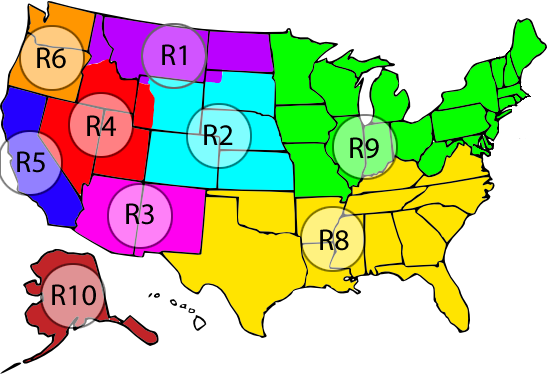
<style>
.page{position:relative;width:550px;height:375px;background:#ffffff}
.page>*{position:absolute;margin:0}
.t1{font:30px "MyriadPro-Regular";color:#000000}
</style>
<div class="page">
<p class="t1" style="left:37px;top:47px;width:29px;height:22px">R6</p>
<p class="t1" style="left:162px;top:44px;width:24px;height:21px">R1</p>
<p class="t1" style="left:87px;top:115px;width:29px;height:21px">R4</p>
<p class="t1" style="left:204px;top:124px;width:29px;height:21px">R2</p>
<p class="t1" style="left:350px;top:137px;width:29px;height:22px">R9</p>
<p class="t1" style="left:17px;top:151px;width:28px;height:22px">R5</p>
<p class="t1" style="left:126px;top:203px;width:28px;height:22px">R3</p>
<p class="t1" style="left:320px;top:229px;width:29px;height:22px">R8</p>
<p class="t1" style="left:52px;top:284px;width:44px;height:22px">R10</p>
</div>
